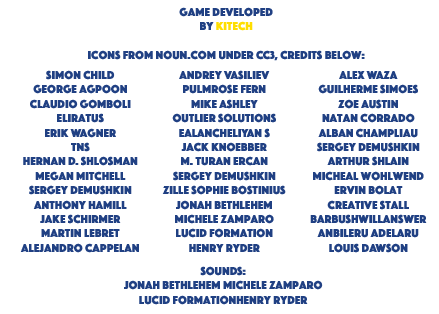
<style>
.page{position:relative;width:439px;height:314px;background:#ffffff}
.page>*{position:absolute;margin:0}
.t1{font:12px "Phosphate-Solid";color:#204083}
.t2{font:12px "Phosphate-Solid";color:#ffde00}
</style>
<div class="page">
<p class="t1" style="left:88px;top:7px;width:277px;height:54px;text-align:center">Game developed <br>by <span class="t2">KiTech<br><br></span>icons from noun.com under CC3, credits below:</p>
<p class="t1" style="left:20px;top:70px;width:119px;height:183px;text-align:center">Simon Child<br>George Agpoon<br>Claudio Gomboli<br>EliRatus<br>Erik Wagner<br>Tns<br>Hernan D. Shlosman<br>Megan Mitchell<br>Sergey Demushkin<br>Anthony Hamill<br>Jake Schirmer<br>Martin Lebret<br>Alejandro Cappelan</p>
<p class="t1" style="left:162px;top:70px;width:124px;height:182px;text-align:center">Andrey Vasiliev<br>Pulmrose Fern<br>Mike Ashley<br>Outlier Solutions<br>Ealancheliyan S<br>Jack Knoebber<br>M. Turan Ercan<br>Sergey Demushkin<br>Zille Sophie Bostinius<br>Jonah Bethlehem<br>Michele Zamparo<br>Lucid Formation<br>Henry Ryder</p>
<p class="t1" style="left:310px;top:71px;width:117px;height:182px;text-align:center">Alex Waza<br>Guilherme Simoes<br>Zoe Austin<br>Natan Corrado<br>Alban Champliau<br>Sergey Demushkin<br>Arthur Shlain<br>Micheal Wohlwend<br>Ervin Bolat<br>Creative Stall<br>Barbushwillanswer<br>Anbileru Adelaru<br>Louis Dawson</p>
<p class="t1" style="left:124px;top:266px;width:199px;height:39px;text-align:center">SOUNDS:<br>Jonah Bethlehem Michele Zamparo <br>Lucid FormationHenry Ryder</p>
</div>
